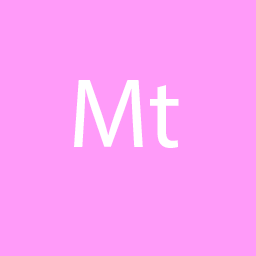
<style>
.page{position:relative;width:256px;height:256px;background:#ff9bf9}
.page>*{position:absolute;margin:0}
.t1{font:100px "MyriadPro-Regular";color:#ffffff}
</style>
<div class="page">
<p class="t1" style="left:74px;top:80px;width:105px;height:68px">Mt</p>
</div>
